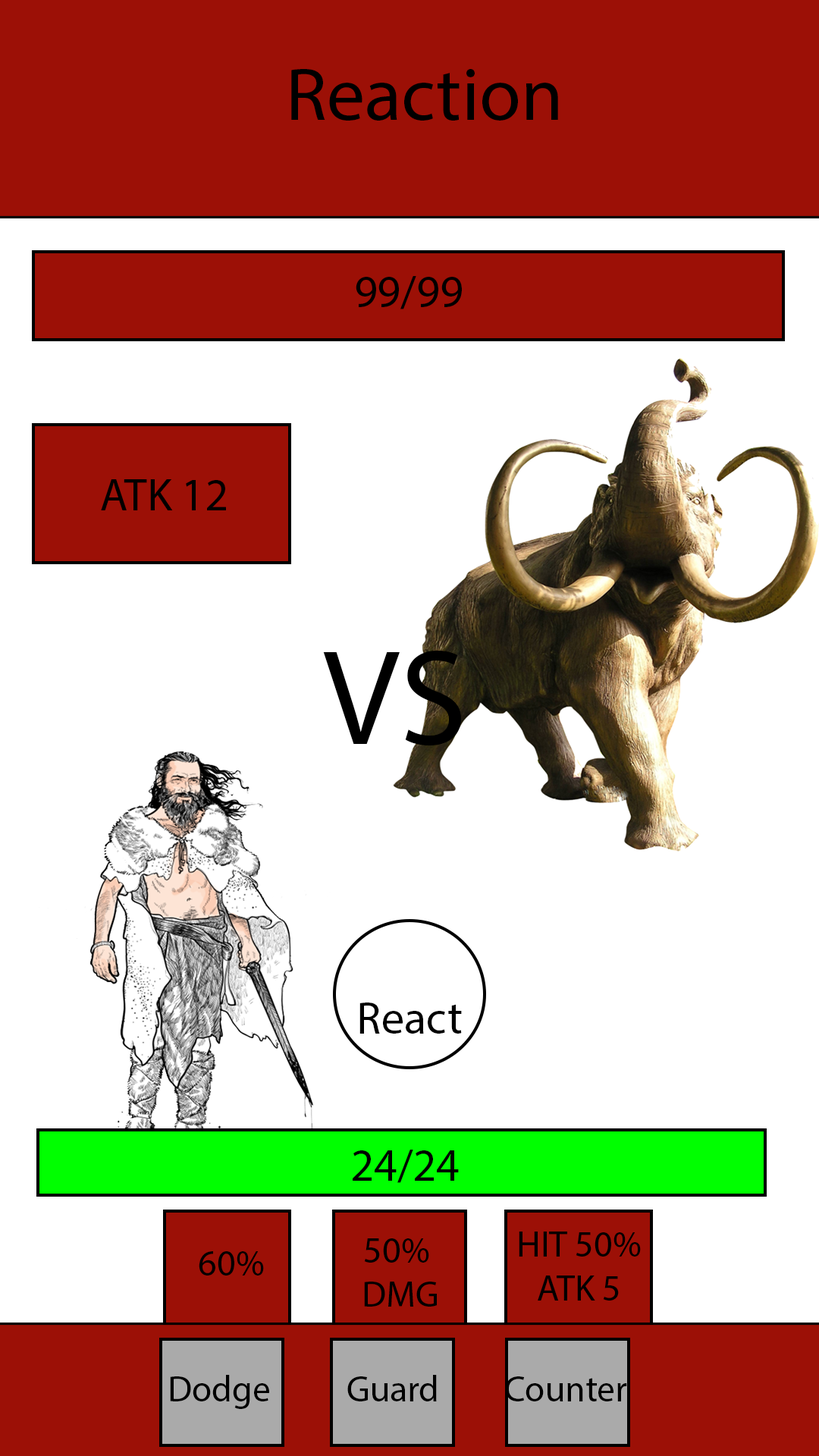
<style>
.page{position:relative;width:819px;height:1456px;background:#ffffff}
.page>*{position:absolute;margin:0}
.t1{font:75.8px "MyriadPro-Regular";color:#000000}
.t2{font:45.5px "MyriadPro-Regular";color:#000000}
.t3{font:136.5px "MyriadPro-Regular";color:#000000}
.t4{font:36.4px "MyriadPro-Regular";color:#000000}
</style>
<div class="page">
<p class="t1" style="left:291px;top:69px;width:267px;height:52px">Reaction</p>
<p class="t2" style="left:356px;top:276px;width:106px;height:33px">99/99</p>
<p class="t2" style="left:101px;top:479px;width:125px;height:31px">ATK 12</p>
<p class="t3" style="left:323px;top:651px;width:138px;height:94px">VS</p>
<p class="t2" style="left:359px;top:1003px;width:103px;height:31px">React</p>
<p class="t2" style="left:353px;top:1150px;width:106px;height:33px">24/24</p>
<p class="t4" style="left:364px;top:1238px;width:73px;height:69px;text-align:center">50% <br>DMG</p>
<p class="t4" style="left:519px;top:1232px;width:122px;height:69px;text-align:center">HIT 50%<br>ATK 5</p>
<p class="t4" style="left:199px;top:1251px;width:65px;height:24px">60%</p>
<p class="t4" style="left:170px;top:1375px;width:99px;height:34px">Dodge</p>
<p class="t4" style="left:347px;top:1375px;width:90px;height:26px">Guard</p>
<p class="t4" style="left:505px;top:1376px;width:122px;height:25px">Counter</p>
</div>
